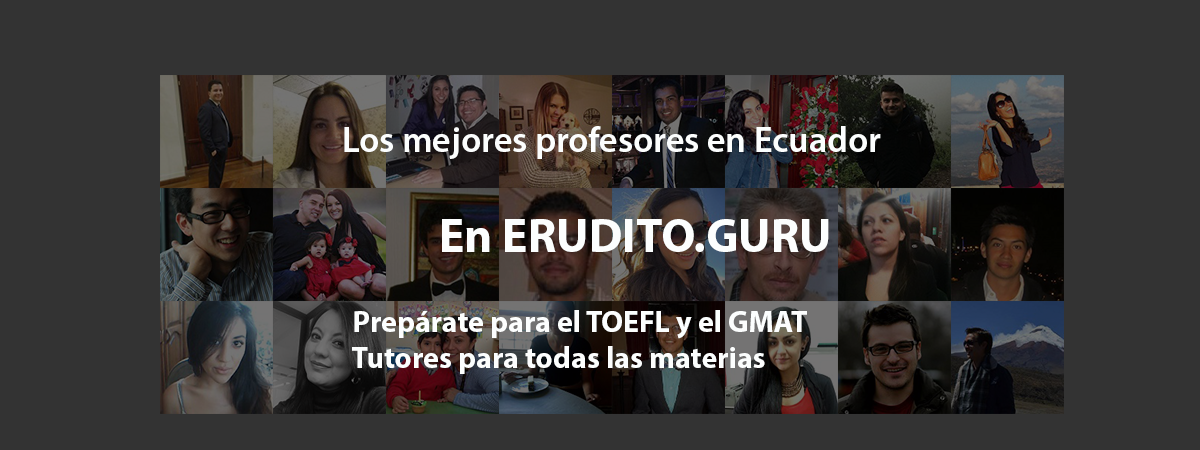
<style>
.page{position:relative;width:1200px;height:450px;background:#333333}
.page>*{position:absolute;margin:0}
.t1{font:30px "MyriadPro-Bold";color:#fcfefe}
.t2{font:36px "MyriadPro-Bold";color:#fcfefe}
.t3{font:36px "MyriadPro-Semibold";color:#fcfefe}
.t4{font:48px "MyriadPro-Bold";color:#fcfefe}
</style>
<div class="page">
<p class="t1" style="left:344px;top:126px;width:537px;height:248px"><span class="t2"> </span><span class="t3">Los mejores profesores en Ecuador<br><br>             </span><span class="t4"> En ERUDITO.GURU<br><br></span>   Prepárate para el TOEFL y el GMAT<br>   Tutores para todas las materias</p>
</div>
